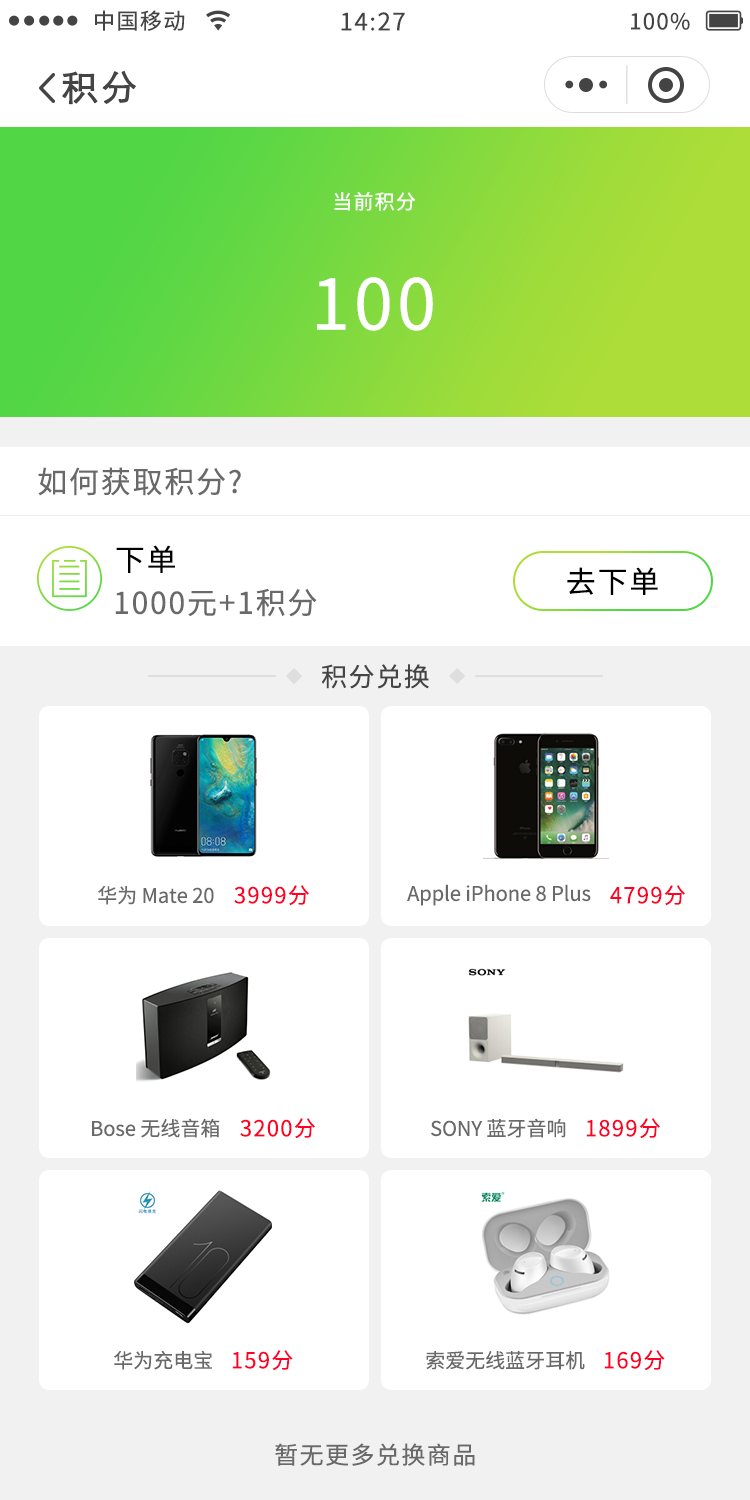
<style>
.page{position:relative;width:750px;height:1500px;background:#ffffff}
.page>*{position:absolute;margin:0}
.t1{font:22px "NotoSansCJKsc-Regular";letter-spacing:0.06em;color:#444444}
.t2{font:24px "NotoSansCJKsc-Regular";letter-spacing:0.06em;color:#444444}
.t3{font:36px "STXihei";letter-spacing:0.06em;color:#444444;font-weight:bold}
.t4{font:20px "NotoSansCJKsc-Regular";letter-spacing:0.06em;color:#ffffff}
.t5{font:70px "NotoSansCJKsc-Regular";letter-spacing:0.06em;color:#ffffff}
.t6{font:30px "NotoSansCJKsc-Regular";letter-spacing:0.06em;color:#6a6969}
.t7{font:30px "NotoSansCJKsc-Regular";letter-spacing:0.06em;color:#000000}
.t8{font:26px "NotoSansCJKsc-Regular";letter-spacing:0.06em;color:#444444}
.t9{font:20px "NotoSansCJKsc-Regular";color:#6a6969}
.t10{font:21.9px "NotoSansCJKsc-Regular";letter-spacing:0.06em;color:#ff0125}
.t11{font:24px "NotoSansCJKsc-Regular";letter-spacing:0.06em;color:#6a6969}
</style>
<div class="page">
<p class="t1" style="left:95px;top:10px;width:90px;height:21px">中国移动</p>
<p class="t2" style="left:341px;top:12px;width:64px;height:19px">14:27</p>
<p class="t1" style="left:631px;top:12px;width:59px;height:18px">100%</p>
<p class="t3" style="left:62px;top:70px;width:74px;height:35px">积分</p>
<p class="t4" style="left:334px;top:192px;width:82px;height:19px">当前积分</p>
<p class="t5" style="left:317px;top:277px;width:116px;height:54px">100</p>
<p class="t6" style="left:38px;top:467px;width:203px;height:29px">如何获取积分?</p>
<p class="t7" style="left:116px;top:545px;width:59px;height:28px">下单</p>
<p class="t7" style="left:567px;top:567px;width:91px;height:28px">去下单</p>
<p class="t6" style="left:115px;top:588px;width:202px;height:29px">1000元+1积分</p>
<p class="t8" style="left:321px;top:664px;width:108px;height:25px">积分兑换</p>
<p class="t9" style="left:98px;top:886px;width:116px;height:19px">华为 Mate 20</p>
<p class="t10" style="left:234px;top:885px;width:75px;height:21px">3999分</p>
<p class="t9" style="left:407px;top:884px;width:184px;height:22px">Apple iPhone 8 Plus</p>
<p class="t10" style="left:610px;top:885px;width:75px;height:21px">4799分</p>
<p class="t9" style="left:92px;top:1118px;width:128px;height:20px">Bose 无线音箱</p>
<p class="t10" style="left:240px;top:1118px;width:75px;height:21px">3200分</p>
<p class="t9" style="left:431px;top:1118px;width:135px;height:20px">SONY 蓝牙音响</p>
<p class="t10" style="left:586px;top:1118px;width:74px;height:21px">1899分</p>
<p class="t9" style="left:114px;top:1350px;width:98px;height:20px">华为充电宝</p>
<p class="t10" style="left:232px;top:1350px;width:61px;height:21px">159分</p>
<p class="t10" style="left:604px;top:1350px;width:61px;height:21px">169分</p>
<p class="t9" style="left:426px;top:1351px;width:159px;height:19px">索爱无线蓝牙耳机</p>
<p class="t11" style="left:275px;top:1443px;width:200px;height:23px">暂无更多兑换商品</p>
</div>
